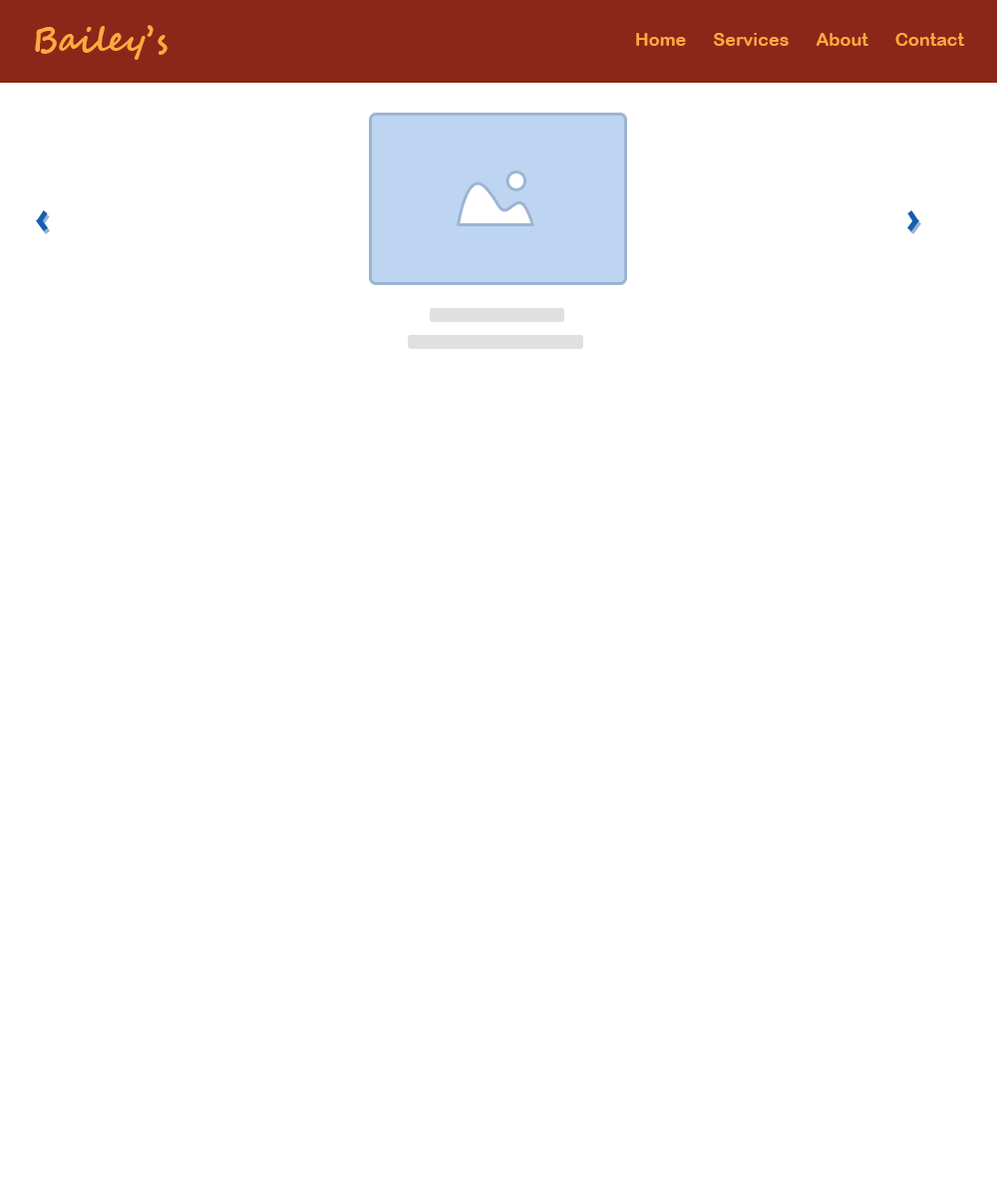
<style>
.page{position:relative;width:997px;height:1196px;background:#ffffff}
.page>*{position:absolute;margin:0}
.t1{font:33.9px "SegoeScript-Bold";color:#fcaa40}
.t2{font:17.9px "ArialRoundedMTBold";color:#fcaa40}
</style>
<div class="page">
<p class="t1" style="left:35px;top:25px;width:132px;height:35px">Bailey’s</p>
<p class="t2" style="left:636px;top:33px;width:329px;height:13px">Home      Services      About      Contact</p>
</div>
